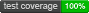
<style>
.page{position:relative;width:89px;height:13px}
.page>*{position:absolute;margin:0}
.t1{font:10px "ArialMT";color:#cccccc;scale:0.9 1}
.t2{font:8px "Helvetica";color:#ffffff}
</style>
<div class="page">
<p class="t1" style="left:3px;top:2px;width:55px;height:9px">test coverage</p>
<p class="t2" style="left:65px;top:3px;width:21px;height:6px">100%</p>
</div>
